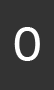
<style>
.page{position:relative;width:54px;height:90px;background:#333333}
.page>*{position:absolute;margin:0}
.t1{font:48px "Sarala-Regular";letter-spacing:0.005em;color:#ffffff}
</style>
<div class="page">
<p class="t1" style="left:14px;top:27px;width:26px;height:34px">0</p>
</div>
